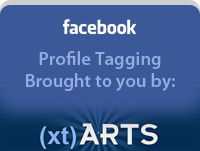
<style>
.page{position:relative;width:200px;height:151px;background:#3b5998}
.page>*{position:absolute;margin:0}
.t1{font:18.7px "MyriadPro-Semibold";color:#93ade2}
</style>
<div class="page">
<p class="t1" style="left:26px;top:51px;width:149px;height:40px;text-align:center">Profile Tagging<br>Brought to you by:</p>
</div>
